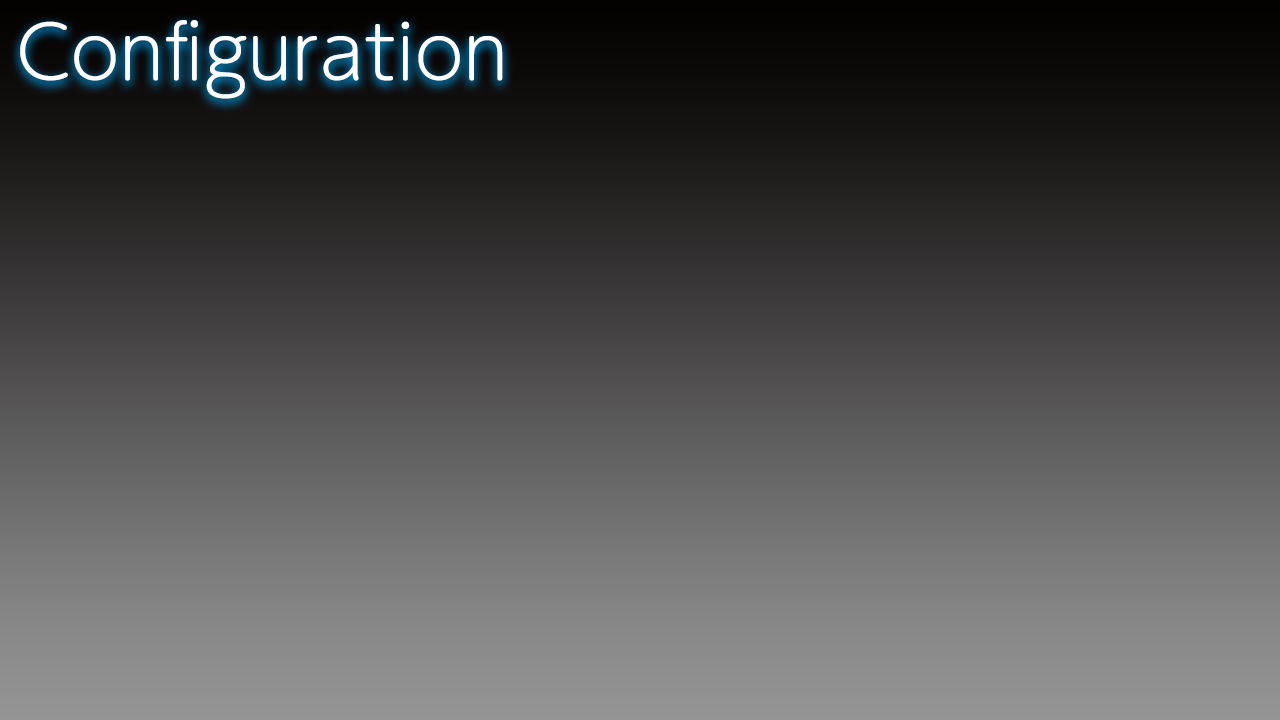
<style>
.page{position:relative;width:1280px;height:720px}
.page>*{position:absolute;margin:0}
.t1{font:72px "UDShinMGoPr6N-Light";color:#ffffff}
</style>
<div class="page">
<p class="t1" style="left:20px;top:20px;width:483px;height:79px">Configuration</p>
</div>
